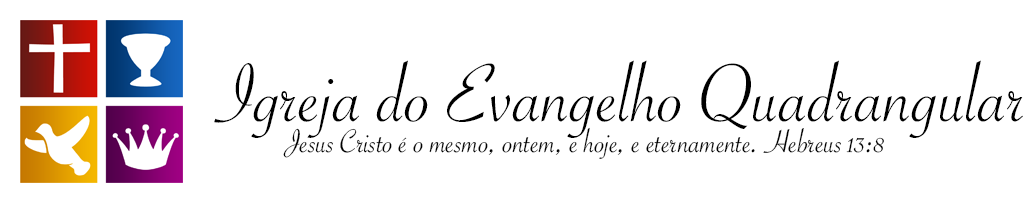
<style>
.page{position:relative;width:1032px;height:202px;background:#ffffff}
.page>*{position:absolute;margin:0}
.t1{font:88.1px "SavoyeLetPlain";color:#000000}
.t2{font:34.9px "SavoyeLetPlain";color:#000000}
</style>
<div class="page">
<p class="t1" style="left:214px;top:60px;width:809px;height:78px">Igreja do Evangelho Quadrangular</p>
<p class="t2" style="left:283px;top:127px;width:601px;height:32px">Jesus Cristo é o mesmo, ontem, e hoje, e eternamente. Hebreus 13:8</p>
</div>
